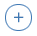
<style>
.page{position:relative;width:37px;height:36px;background:#ffffff}
.page>*{position:absolute;margin:0}
.t1{font:18px "MyriadPro-Regular";color:#3e78b3}
</style>
<div class="page">
<p class="t1" style="left:14px;top:12px;width:10px;height:11px">+</p>
</div>
